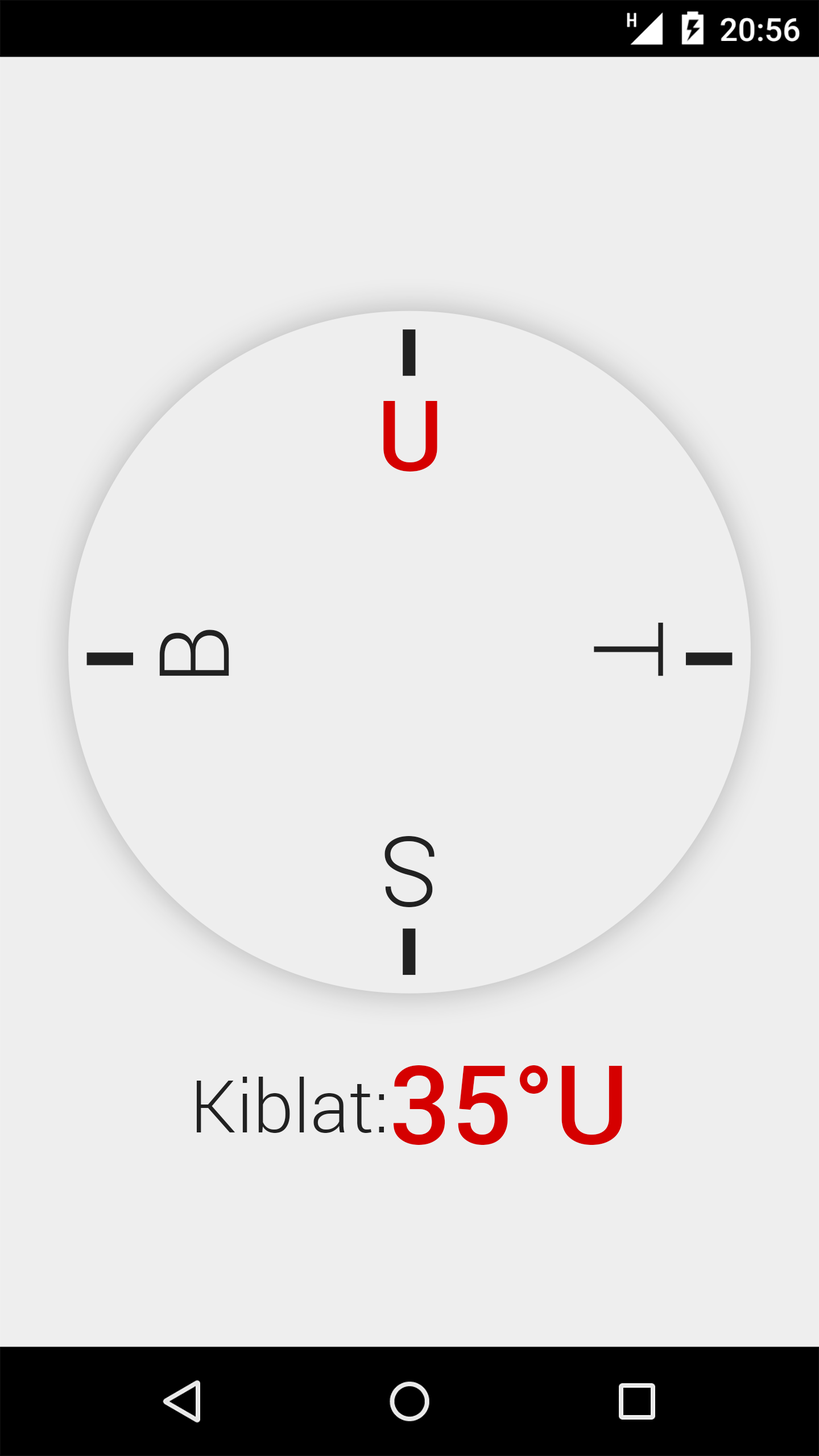
<style>
.page{position:relative;width:819px;height:1456px;background:#eeeeee}
.page>*{position:absolute;margin:0}
.t1{font:97.1px "Roboto-Medium";color:#d50000}
.t2{font:97.1px "Roboto-Light";color:#212121}
.t3{font:72.8px "Roboto-Light";color:#212121}
.t4{font:109.2px "Roboto-Medium";color:#d50000}
</style>
<div class="page">
<p class="t1" style="left:383px;top:401px;width:54px;height:70px">U</p>
<p class="t2" style="left:159px;top:630px;width:70px;height:46px;rotate:-90deg">B</p>
<p class="t2" style="left:594px;top:622px;width:69px;height:54px;rotate:90deg">T</p>
<p class="t2" style="left:384px;top:836px;width:51px;height:71px;rotate:180deg">S</p>
<p class="t3" style="left:196px;top:1065px;width:426px;height:80px">Kiblat:<span class="t4">35°U</span></p>
</div>
